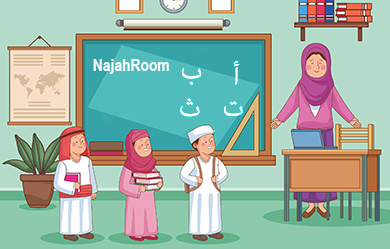
<style>
.page{position:relative;width:390px;height:249px}
.page>*{position:absolute;margin:0}
.t1{font:16.9px "ArialNarrow-Bold";color:#ffffff}
</style>
<div class="page">
<p class="t1" style="left:93px;top:59px;width:76px;height:15px;opacity:0.95">NajahRoom</p>
</div>
